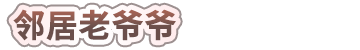
<style>
.page{position:relative;width:360px;height:50px;background:#ffffff}
.page>*{position:absolute;margin:0}
.t1{font:32px "SourceHanSansSC-Bold";color:#73534d;font-weight:bold}
</style>
<div class="page">
<p class="t1" style="left:13px;top:9px;width:163px;height:32px">邻居老爷爷</p>
</div>
